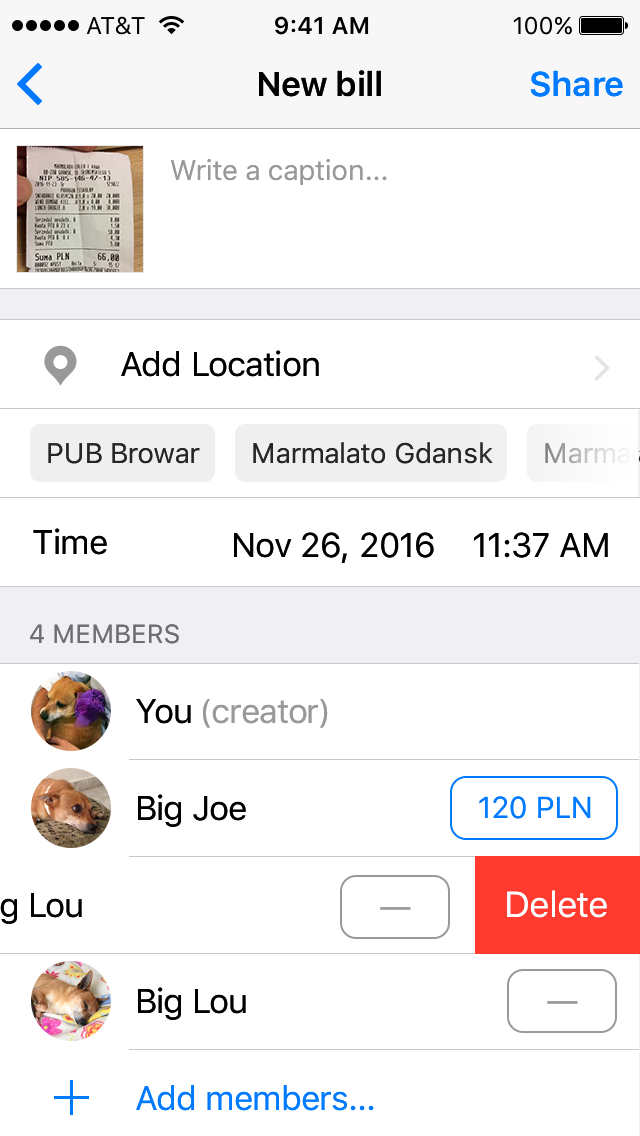
<style>
.page{position:relative;width:640px;height:1136px;background:#ffffff}
.page>*{position:absolute;margin:0}
.t1{font:34px "SFUIText-Semibold";letter-spacing:-0.025em;color:#000000}
.t2{font:34px "SFUIText-Semibold";letter-spacing:-0.025em;color:#007aff}
.t3{font:28px "SFUIText-Regular";letter-spacing:-0.01em;color:#999999}
.t4{font:34px "SFUIText-Regular";letter-spacing:-0.025em;color:#000000}
.t5{font:28px "SFUIText-Regular";letter-spacing:-0.01em;color:#262626}
.t6{font:26px "SFUIText-Regular";letter-spacing:-0.005em;color:#6e6e70;text-transform:uppercase}
.t7{font:34px "SFUIText-Regular";letter-spacing:-0.03em;color:#999999}
.t8{font:34px "SFUIText-Regular";letter-spacing:-0.03em;color:#000000}
.t9{font:30px "SFUIText-Regular";letter-spacing:-0.016em;color:#007aff}
.t10{font:36px "SFUIText-Regular";letter-spacing:-0.03em;color:#ffffff}
.t11{font:30px "SFUIText-Regular";letter-spacing:-0.016em;color:#999999}
.t12{font:34px "SFUIText-Regular";letter-spacing:-0.03em;color:#007aff}
</style>
<div class="page">
<p class="t1" style="left:259px;top:70px;width:122px;height:27px">New bill</p>
<p class="t2" style="left:530px;top:70px;width:93px;height:27px">Share</p>
<p class="t3" style="left:170px;top:159px;width:217px;height:26px">Write a caption...</p>
<p class="t4" style="left:121px;top:350px;width:198px;height:27px">Add Location</p>
<p class="t5" style="left:48px;top:443px;width:152px;height:21px">PUB Browar</p>
<p class="t5" style="left:253px;top:442px;width:240px;height:22px">Marmalato Gdansk</p>
<p class="t4" style="left:33px;top:528px;width:74px;height:27px">Time</p>
<p class="t4" style="left:234px;top:532px;width:374px;height:31px">Nov 26, 2016    11:37 AM</p>
<p class="t6" style="left:30px;top:624px;width:149px;height:20px">4 members</p>
<p class="t7" style="left:136px;top:699px;width:192px;height:29px"><span class="t8">You </span>(creator)</p>
<p class="t8" style="left:138px;top:794px;width:108px;height:33px">Big Joe</p>
<p class="t9" style="left:479px;top:796px;width:112px;height:23px">120 PLN</p>
<p class="t10" style="left:507px;top:890px;width:100px;height:28px">Delete</p>
<p class="t11" style="left:380px;top:907px;width:31px;height:3px">—</p>
<p class="t8" style="left:138px;top:987px;width:108px;height:33px">Big Lou</p>
<p class="t11" style="left:547px;top:1001px;width:31px;height:3px">—</p>
<p class="t12" style="left:136px;top:1085px;width:238px;height:26px">Add members...</p>
</div>
